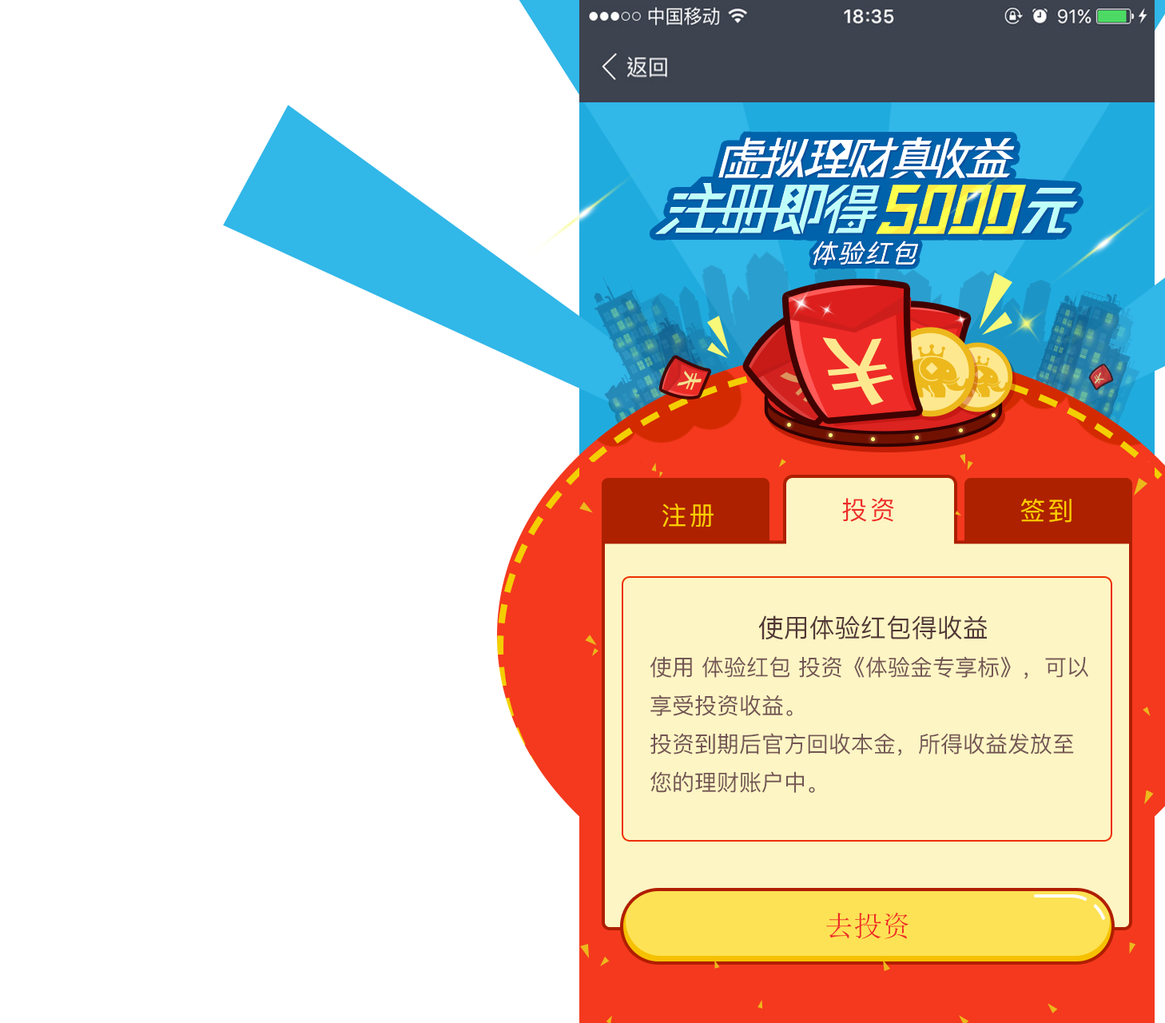
<style>
.page{position:relative;width:1165px;height:1023px;background:#ffffff}
.page>*{position:absolute;margin:0}
.t1{font:26.3px "PingFangSC-Regular";color:#ffffff;scale:0.97 1}
.t2{font:25.6px "PingFangSC-Regular";letter-spacing:0.1em;color:#ee2b27;text-transform:uppercase}
.t3{font:25.6px "PingFangSC-Regular";letter-spacing:0.1em;color:#ffcc00;text-transform:uppercase}
.t4{font:22.4px/38.4px "PingFangSC-Regular";color:#735554;text-transform:uppercase}
.t5{font:25.6px/38.4px "PingFangSC-Regular";color:#513736;text-transform:uppercase}
.t6{font:28.8px "SimSun";color:#ee2b27;text-transform:uppercase}
</style>
<div class="page">
<p class="t1" style="left:814px;top:241px;width:104px;height:24px">体验红包</p>
<p class="t1" style="left:814px;top:241px;width:104px;height:24px">体验红包</p>
<p class="t2" style="left:843px;top:498px;width:51px;height:24px">投资</p>
<p class="t3" style="left:663px;top:504px;width:51px;height:24px">注册</p>
<p class="t3" style="left:1021px;top:499px;width:51px;height:24px">签到</p>
<p class="t4" style="left:650px;top:615px;width:439px;height:178px;text-align:center"><span class="t5">使用体验红包得收益<br></span>使用 体验红包 投资《体验金专享标》，可以享受投资收益。<br>投资到期后官方回收本金，所得收益发放至您的理财账户中。</p>
<p class="t6" style="left:827px;top:912px;width:83px;height:27px">去投资</p>
</div>
